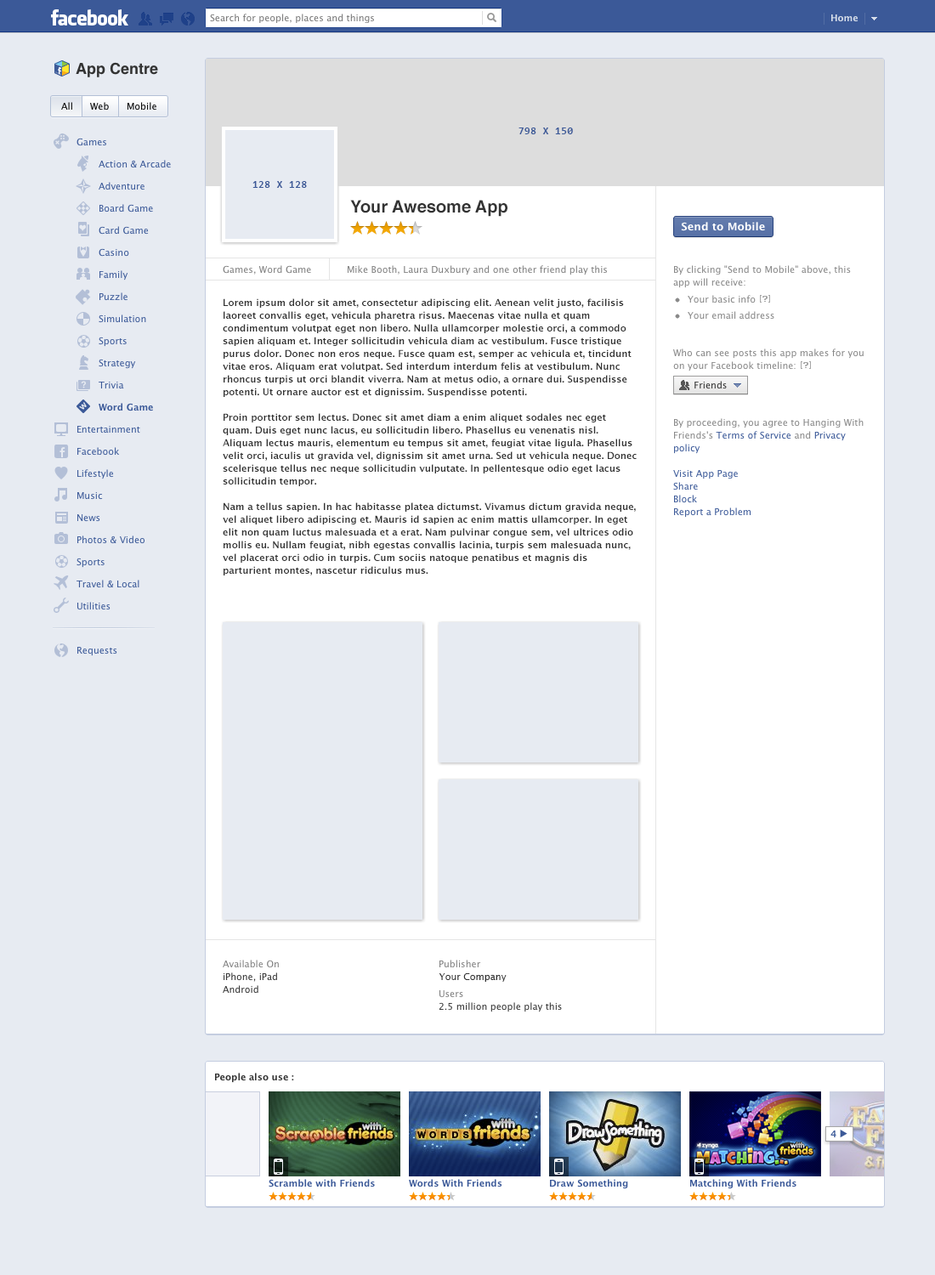
<style>
.page{position:relative;width:935px;height:1275px;background:#e7ebf2}
.page>*{position:absolute;margin:0}
.t1{font:17px "Helvetica-Bold";color:#333333}
.t2{font:9.4px/12.8px "LucidaGrande-Bold";color:#333333}
.t3{font:9.4px "LucidaGrande";color:#333333}
</style>
<div class="page">
<p class="t1" style="left:350px;top:200px;width:158px;height:17px">Your Awesome App</p>
<p class="t2" style="left:223px;top:298px;width:414px;height:278px">Lorem ipsum dolor sit amet, consectetur adipiscing elit. Aenean velit justo, facilisis laoreet convallis eget, vehicula pharetra risus. Maecenas vitae nulla et quam condimentum volutpat eget non libero. Nulla ullamcorper molestie orci, a commodo sapien aliquam et. Integer sollicitudin vehicula diam ac vestibulum. Fusce tristique purus dolor. Donec non eros neque. Fusce quam est, semper ac vehicula et, tincidunt vitae eros. Aliquam erat volutpat. Sed interdum interdum felis at vestibulum. Nunc rhoncus turpis ut orci blandit viverra. Nam at metus odio, a ornare dui. Suspendisse potenti. Ut ornare auctor est et dignissim. Suspendisse potenti.<br><br>Proin porttitor sem lectus. Donec sit amet diam a enim aliquet sodales nec eget quam. Duis eget nunc lacus, eu sollicitudin libero. Phasellus eu venenatis nisl. Aliquam lectus mauris, elementum eu tempus sit amet, feugiat vitae ligula. Phasellus velit orci, iaculis ut gravida vel, dignissim sit amet urna. Sed ut vehicula neque. Donec scelerisque tellus nec neque sollicitudin vulputate. In pellentesque odio eget lacus sollicitudin tempor.<br><br>Nam a tellus sapien. In hac habitasse platea dictumst. Vivamus dictum gravida neque, vel aliquet libero adipiscing et. Mauris id sapien ac enim mattis ullamcorper. In eget elit non quam luctus malesuada et a erat. Nam pulvinar congue sem, vel ultrices odio mollis eu. Nullam feugiat, nibh egestas convallis lacinia, turpis sem malesuada nunc, vel placerat orci odio in turpis. Cum sociis natoque penatibus et magnis dis parturient montes, nascetur ridiculus mus.<br><br>Nam ultricies orci non metus fermentum vulputate nec et sapien. Nulla semper fermentum sapien, ut venenatis tortor sollicitudin non. Maecenas diam libero, aliquam vel ornare luctus, aliquet consectetur tellus. Sed sed eros massa, quis tempus metus. Donec ut leo risus. Vivamus blandit erat eget felis pellentesque id rutrum justo dictum. Proin at eleifend ipsum. Etiam mauris orci, lacinia a posuere eu, interdum eu purus. Duis et nibh a sapien ultricies porttitor. Integer id enim quis lectus vehicula venenatis ut a lectus. Etiam ullamcorper massa sodales purus eleifend a facilisis augue tempus. Sed eget neque sed purus porta suscipit vitae vitae quam. Cras nisl tellus, rhoncus in ornare non, pretium nec massa.<br><br>Vivamus adipiscing sapien vel massa elementum scelerisque. Ut vel porttitor felis. Integer vulputate magna et leo aliquet sagittis. Nam eros neque, convallis in semper vel, ornare vel diam. Curabitur vulputate nunc pretium erat congue rutrum. In hac habitasse platea dictumst. Nunc pharetra bibendum mi, in euismod erat viverra sit amet. Vestibulum sodales dui eu diam feugiat sed tristique libero pellentesque. Duis tempor scelerisque fringilla. Pellentesque tempus accumsan enim, sed venenatis magna porta in. Quisque id magna nunc. Proin magna libero, congue lobortis euismod sed, congue a neque. In vel purus erat. Aliquam erat volutpat.</p>
<p class="t3" style="left:439px;top:973px;width:68px;height:9px">Your Company</p>
</div>
